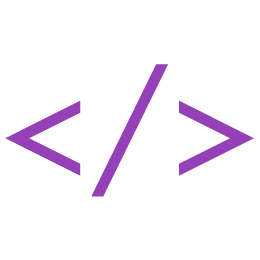
<style>
.page{position:relative;width:260px;height:260px;background:#ffffff}
.page>*{position:absolute;margin:0}
.t1{font:144px "LucidaConsole";color:#9441b7}
</style>
<div class="page">
<p class="t1" style="left:5px;top:64px;width:249px;height:133px">&lt;/&gt;</p>
</div>
